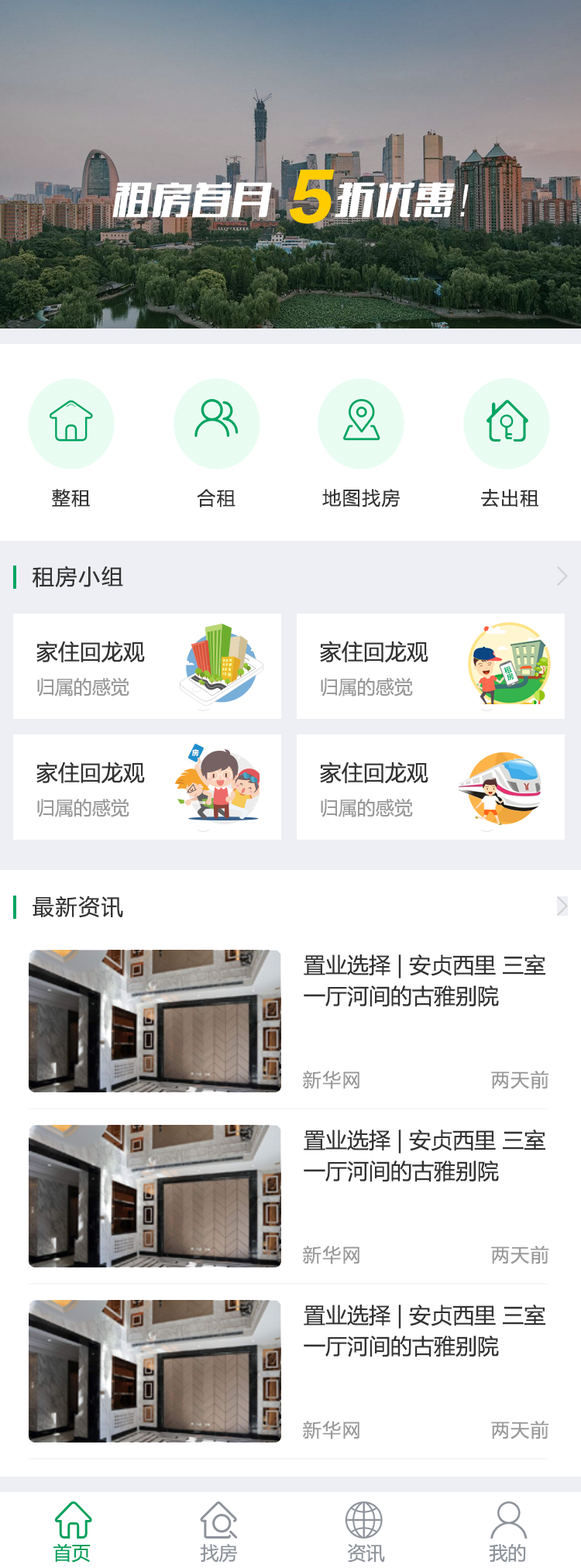
<style>
.page{position:relative;width:581px;height:1568px;background:#ffffff}
.page>*{position:absolute;margin:0}
.t1{font:18.6px "MicrosoftYaHei";letter-spacing:0.06em;color:#333333}
.t2{font:21.7px "MicrosoftYaHei";letter-spacing:0.06em;color:#333333}
.t3{font:21.7px "MicrosoftYaHei";color:#333333}
.t4{font:18.6px "MicrosoftYaHei";color:#999999}
.t5{font:21.7px/31px "MicrosoftYaHei";color:#333333}
.t6{font:18.6px "MicrosoftYaHei";letter-spacing:0.06em;color:#999999}
.t7{font:18.6px "MicrosoftYaHei";color:#8f949c}
.t8{font:18.6px "MicrosoftYaHei";color:#01a15c}
</style>
<div class="page">
<p class="t1" style="left:51px;top:489px;width:487px;height:18px">整租                合租             地图找房            去出租</p>
<p class="t2" style="left:33px;top:566px;width:90px;height:22px">租房小组</p>
<p class="t3" style="left:36px;top:641px;width:109px;height:22px">家住回龙观</p>
<p class="t3" style="left:320px;top:641px;width:108px;height:22px">家住回龙观</p>
<p class="t4" style="left:37px;top:678px;width:92px;height:18px">归属的感觉</p>
<p class="t4" style="left:321px;top:678px;width:92px;height:18px">归属的感觉</p>
<p class="t3" style="left:36px;top:762px;width:109px;height:22px">家住回龙观</p>
<p class="t3" style="left:320px;top:762px;width:108px;height:22px">家住回龙观</p>
<p class="t4" style="left:37px;top:799px;width:92px;height:18px">归属的感觉</p>
<p class="t4" style="left:321px;top:799px;width:92px;height:18px">归属的感觉</p>
<p class="t2" style="left:33px;top:896px;width:90px;height:22px">最新资讯</p>
<p class="t5" style="left:304px;top:954px;width:241px;height:53px">置业选择 | 安贞西里 三室<br>一厅河间的古雅别院</p>
<p class="t6" style="left:303px;top:1071px;width:56px;height:18px">新华网</p>
<p class="t6" style="left:491px;top:1071px;width:58px;height:18px">两天前</p>
<p class="t5" style="left:304px;top:1129px;width:241px;height:53px">置业选择 | 安贞西里 三室<br>一厅河间的古雅别院</p>
<p class="t6" style="left:303px;top:1246px;width:56px;height:18px">新华网</p>
<p class="t6" style="left:491px;top:1246px;width:58px;height:18px">两天前</p>
<p class="t5" style="left:304px;top:1304px;width:241px;height:53px">置业选择 | 安贞西里 三室<br>一厅河间的古雅别院</p>
<p class="t6" style="left:303px;top:1421px;width:56px;height:18px">新华网</p>
<p class="t6" style="left:491px;top:1421px;width:58px;height:18px">两天前</p>
<p class="t7" style="left:53px;top:1543px;width:473px;height:20px"><span class="t8">首页</span>                    找房                    资讯                   我的</p>
</div>
